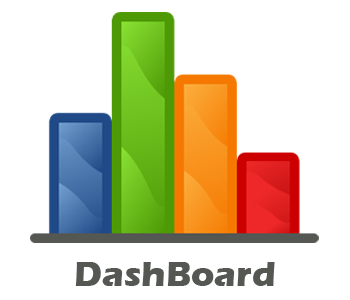
<style>
.page{position:relative;width:350px;height:300px;background:#ffffff}
.page>*{position:absolute;margin:0}
.t1{font:36px "ErasITC-Bold";color:#555753}
</style>
<div class="page">
<p class="t1" style="left:75px;top:262px;width:200px;height:24px">DashBoard</p>
</div>
